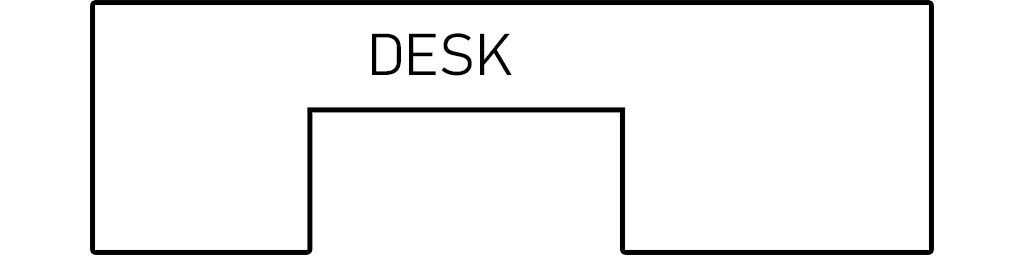
<style>
.page{position:relative;width:1024px;height:256px;background:#ffffff}
.page>*{position:absolute;margin:0}
.t1{font:58.4px "Bahnschrift-Light";color:#000000}
</style>
<div class="page">
<p class="t1" style="left:372px;top:33px;width:140px;height:43px">DESK</p>
</div>
